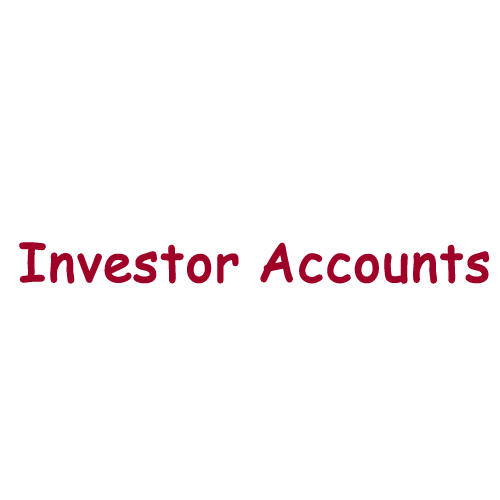
<style>
.page{position:relative;width:500px;height:500px;background:#ffffff}
.page>*{position:absolute;margin:0}
.t1{font:52px "ComicSansMS";color:#9f0027;font-weight:bold}
</style>
<div class="page">
<p class="t1" style="left:19px;top:242px;width:471px;height:42px">Investor Accounts</p>
</div>
